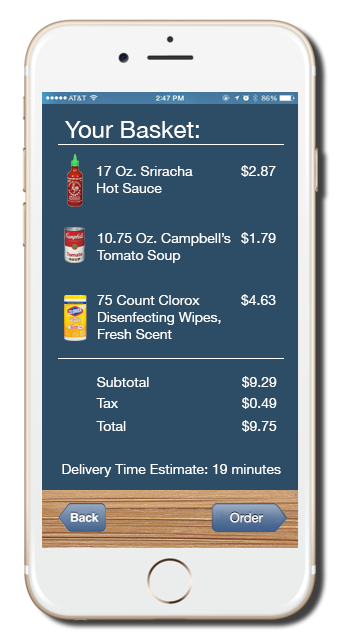
<style>
.page{position:relative;width:340px;height:640px;background:#2d4d67}
.page>*{position:absolute;margin:0}
.t1{font:24px "HelveticaNeue";color:#ffffff}
.t2{font:14px "HelveticaNeue";color:#ffffff}
.t3{font:13.1px "HelveticaNeue";color:#ffffff}
</style>
<div class="page">
<p class="t1" style="left:65px;top:121px;width:134px;height:17px">Your Basket:</p>
<p class="t2" style="left:97px;top:166px;width:96px;height:27px">17 Oz. Sriracha<br>Hot Sauce</p>
<p class="t2" style="left:241px;top:165px;width:35px;height:12px">$2.87</p>
<p class="t2" style="left:96px;top:233px;width:135px;height:30px">10.75 Oz. Campbell’s<br>Tomato Soup</p>
<p class="t2" style="left:241px;top:232px;width:35px;height:12px">$1.79</p>
<p class="t2" style="left:241px;top:294px;width:35px;height:12px">$4.63</p>
<p class="t2" style="left:97px;top:295px;width:124px;height:44px">75 Count Clorox Disenfecting Wipes,<br>Fresh Scent</p>
<p class="t2" style="left:97px;top:377px;width:52px;height:10px">Subtotal</p>
<p class="t2" style="left:242px;top:376px;width:35px;height:12px">$9.29</p>
<p class="t2" style="left:96px;top:398px;width:22px;height:10px">Tax</p>
<p class="t2" style="left:242px;top:397px;width:35px;height:12px">$0.49</p>
<p class="t2" style="left:96px;top:421px;width:30px;height:10px">Total</p>
<p class="t2" style="left:242px;top:420px;width:35px;height:12px">$9.75</p>
<p class="t2" style="left:62px;top:464px;width:219px;height:13px">Delivery Time Estimate: 19 minutes</p>
<p class="t3" style="left:230px;top:512px;width:33px;height:11px">Order</p>
</div>
